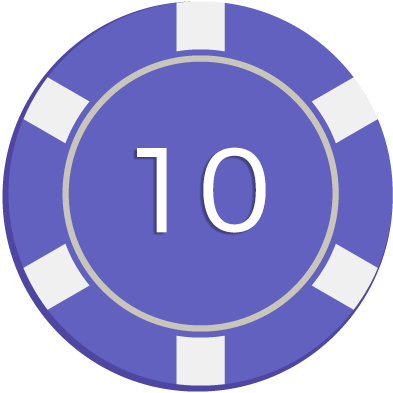
<style>
.page{position:relative;width:393px;height:393px;background:#6261bf}
.page>*{position:absolute;margin:0}
.t1{font:120px "Montserrat-Light";color:#ffffff}
</style>
<div class="page">
<p class="t1" style="left:137px;top:147px;width:129px;height:86px">10</p>
</div>
